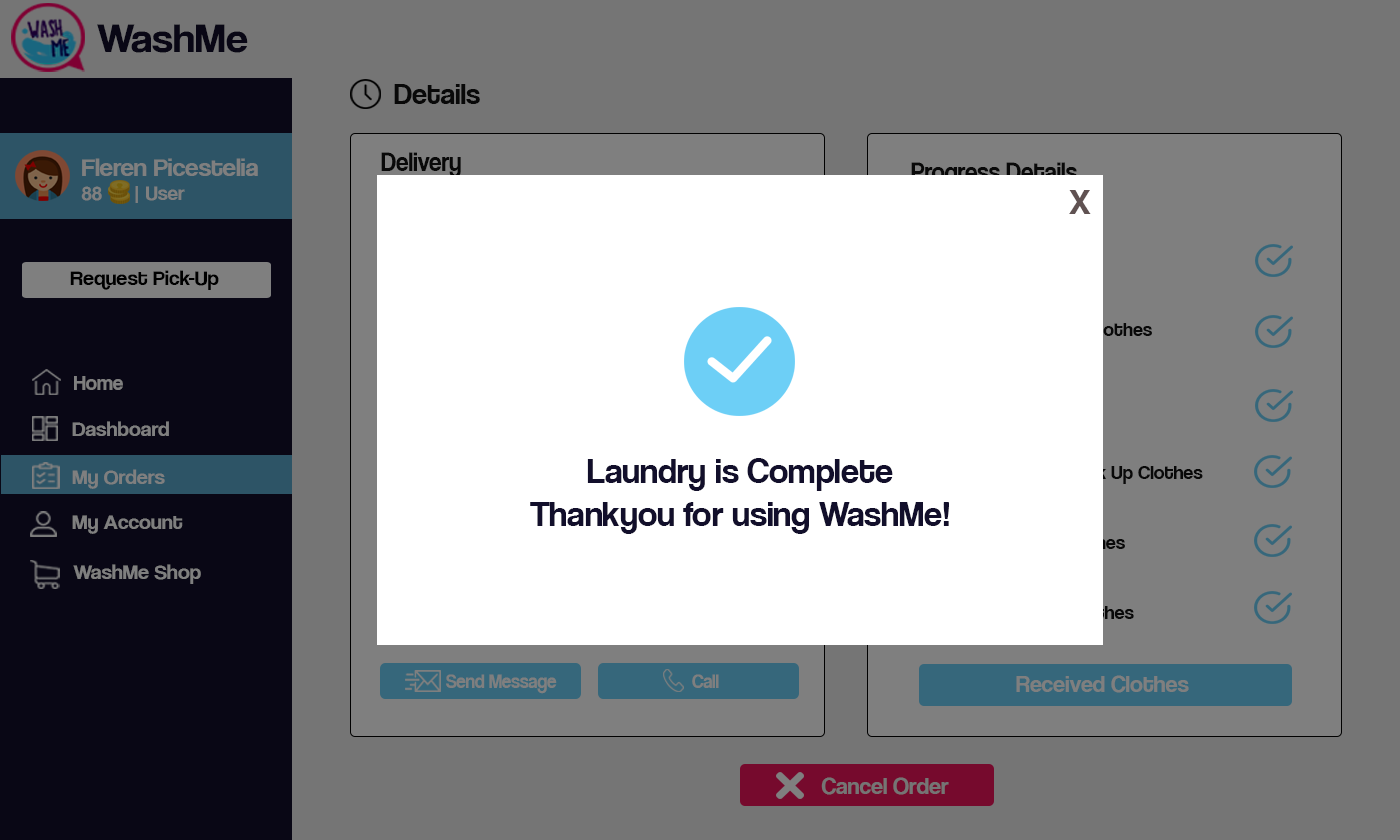
<style>
.page{position:relative;width:1400px;height:840px;background:#757575}
.page>*{position:absolute;margin:0}
.t1{font:42.1px "CoolveticaRg-Regular";color:#120f2b;scale:1.05 1}
.t2{font:30px "CoolveticaRg-Regular";color:#121313}
.t3{font:25.2px "CoolveticaRg-Regular";color:#7f7f7f;scale:1.05 1}
.t4{font:20px "CoolveticaRg-Regular";color:#7f7f7f;scale:1.05 1}
.t5{font:27px "CoolveticaRg-Regular";color:#121313;scale:0.91 1}
.t6{font:36px "CoolveticaRg-Regular";color:#605252}
.t7{font:21px "CoolveticaRg-Regular";color:#000000;scale:1.05 1}
.t8{font:21px "CoolveticaRg-Regular";color:#7f7f7f}
.t9{font:21px "CoolveticaRg-Regular";color:#7f7f7f;scale:1.05 1}
.t10{font:36px "CoolveticaRg-Regular";color:#120f2b}
.t11{font:20.3px "CoolveticaRg-Regular";color:#7f7f7f;scale:0.91 1}
.t12{font:24px "CoolveticaRg-Regular";color:#7f7f7f}
.t13{font:24px "CoolveticaRg-Regular";color:#757575}
</style>
<div class="page">
<p class="t1" style="left:97px;top:24px;width:151px;height:29px">WashMe</p>
<p class="t2" style="left:394px;top:84px;width:86px;height:20px">Details</p>
<p class="t3" style="left:81px;top:158px;width:177px;height:45px">Fleren Picestelia<br><span class="t4">88      | User</span></p>
<p class="t5" style="left:381px;top:152px;width:80px;height:26px">Delivery</p>
<p class="t5" style="left:911px;top:162px;width:166px;height:26px">Progress Details</p>
<p class="t6" style="left:1069px;top:190px;width:22px;height:24px">X</p>
<p class="t7" style="left:70px;top:270px;width:149px;height:20px">Request Pick-Up</p>
<p class="t8" style="left:74px;top:376px;width:49px;height:14px">Home</p>
<p class="t9" style="left:72px;top:421px;width:97px;height:15px">Dashboard</p>
<p class="t10" style="left:530px;top:458px;width:419px;height:76px;text-align:center">Laundry is Complete<br>Thankyou for using WashMe!</p>
<p class="t9" style="left:72px;top:469px;width:93px;height:20px">My Orders</p>
<p class="t9" style="left:72px;top:515px;width:111px;height:19px">My Account</p>
<p class="t9" style="left:73px;top:564px;width:128px;height:20px">WashMe Shop</p>
<p class="t11" style="left:446px;top:674px;width:111px;height:20px">Send Message</p>
<p class="t11" style="left:692px;top:674px;width:27px;height:14px">Call</p>
<p class="t12" style="left:1016px;top:675px;width:173px;height:18px">Received Clothes</p>
<p class="t13" style="left:821px;top:777px;width:128px;height:18px">Cancel Order</p>
</div>
